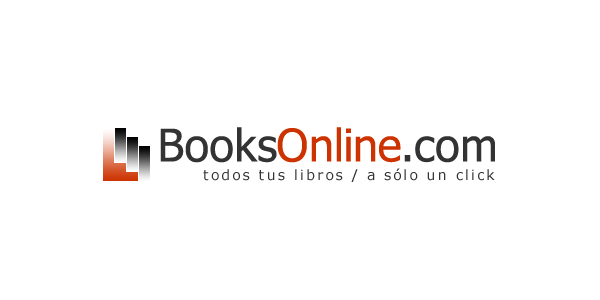
<style>
.page{position:relative;width:600px;height:300px;background:#ffffff}
.page>*{position:absolute;margin:0}
.t1{font:45px "Tahoma";color:#cc3300}
.t2{font:45px "Tahoma";color:#333333}
.t3{font:14px "Verdana";letter-spacing:0.15em;color:#333333}
</style>
<div class="page">
<p class="t1" style="left:160px;top:127px;width:335px;height:36px"><span class="t2">Books</span>Online<span class="t2">.com</span></p>
<p class="t3" style="left:203px;top:168px;width:292px;height:14px">todos tus libros / a sólo un click</p>
</div>
